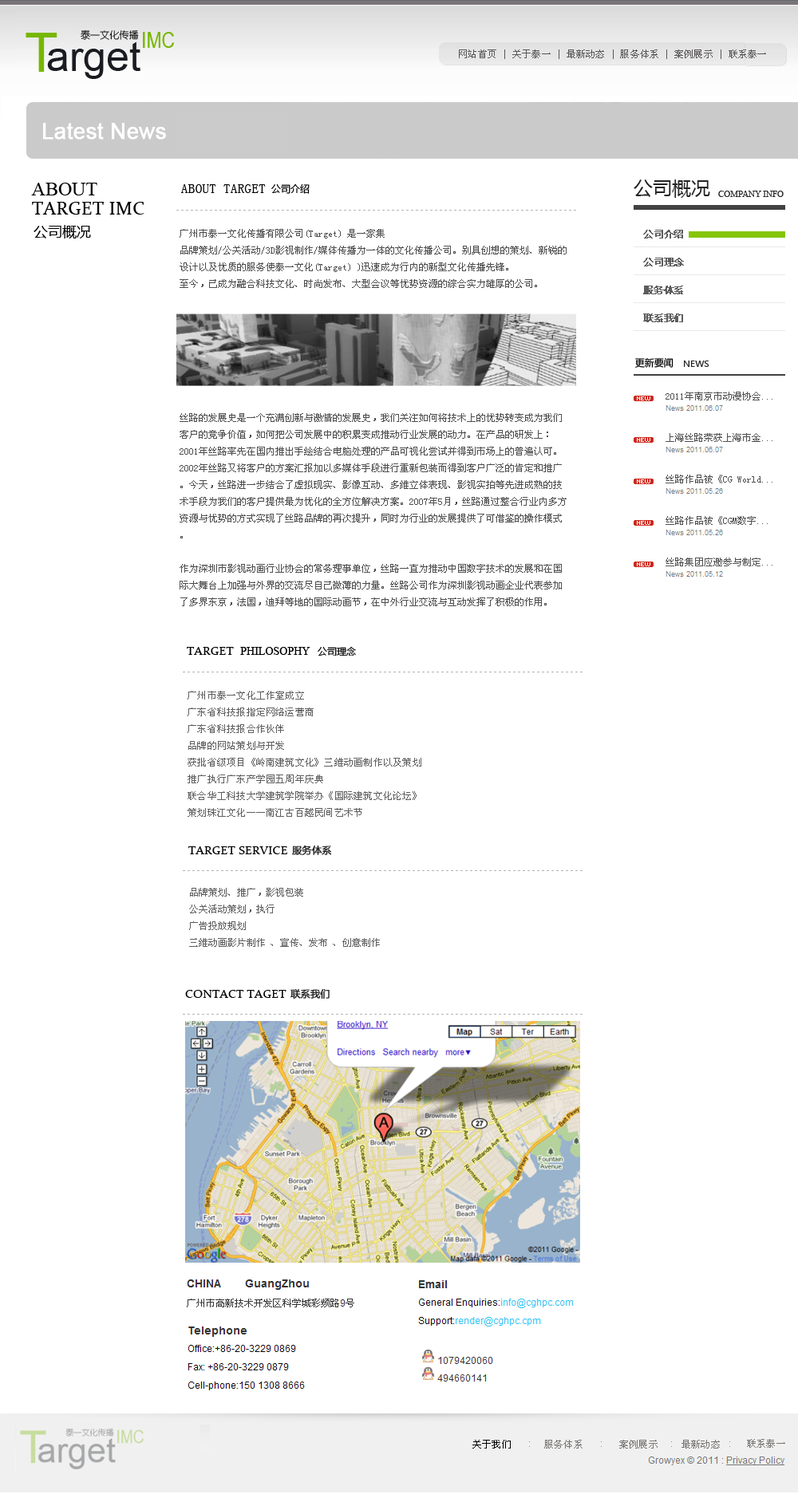
<style>
.page{position:relative;width:798px;height:1494px;background:#ffffff}
.page>*{position:absolute;margin:0}
.t1{font:21.5px "ArialMT";color:#ffffff;font-weight:bold}
.t2{font:21.5px "YouYuan";color:#ffffff;font-weight:bold}
.t3{font:13.6px "SimSun";letter-spacing:0.02em;color:#000000}
.t4{font:18.4px "Constantia";letter-spacing:0.02em;color:#000000}
.t5{font:9.6px "SimSun";color:#4e4e4e}
.t6{font:9.6px/27.9px "MicrosoftYaHei";letter-spacing:-0.02em;color:#5d5d5d;font-weight:bold}
.t7{font:12px "Constantia";letter-spacing:0.02em;color:#000000}
.t8{font:9.6px "SimSun";letter-spacing:0.02em;color:#605f5f}
.t9{font:9.6px "MicrosoftYaHei";color:#282828;font-weight:bold}
.t10{font:9.6px "SimSun";color:#605f5f}
</style>
<div class="page">
<p class="t1" style="left:43px;top:121px;width:224px;height:22px">Latest News  <span class="t2">公司动态</span></p>
<p class="t3" style="left:181px;top:184px;width:85px;height:9px">ABOUT TARGET</p>
<p class="t4" style="left:32px;top:202px;width:112px;height:13px">TARGET IMC</p>
<p class="t5" style="left:180px;top:229px;width:387px;height:377px">广州市泰一文化传播有限公司(Target) 是一家集<br>品牌策划/公关活动/3D影视制作/媒体传播为一体的文化传播公司。别具创想的策划、新锐的设计以及优质的服务使泰一文化(Target) )迅速成为行内的新型文化传播先锋。 <br>至今，已成为融合科技文化、时尚发布、大型会议等优势资源的综合实力雄厚的公司。<br><br><br><br><br><br><br><br>丝路的发展史是一个充满创新与激情的发展史，我们关注如何将技术上的优势转变成为我们客户的竞争价值，如何把公司发展中的积累变成推动行业发展的动力。在产品的研发上： 2001年丝路率先在国内推出手绘结合电脑处理的产品可视化尝试并得到市场上的普遍认可。2002年丝路又将客户的方案汇报加以多媒体手段进行重新包装而得到客户广泛的肯定和推广。今天，丝路进一步结合了虚拟现实、影像互动、多维立体表现、影视实拍等先进成熟的技术手段为我们的客户提供最为优化的全方位解决方案。2007年5月，丝路通过整合行业内多方资源与优势的方式实现了丝路品牌的再次提升，同时为行业的发展提供了可借鉴的操作模式。 <br><br>作为深圳市影视动画行业协会的常务理事单位，丝路一直为推动中国数字技术的发展和在国际大舞台上加强与外界的交流尽自己微薄的力量。丝路公司作为深圳影视动画企业代表参加了多界东京，法国，迪拜等地的国际动画节，在中外行业交流与互动发挥了积极的作用。</p>
<p class="t6" style="left:643px;top:230px;width:41px;height:92px">公司介绍<br>公司理念<br>服务体系<br>联系我们</p>
<p class="t7" style="left:187px;top:647px;width:47px;height:8px">TARGET</p>
<p class="t8" style="left:188px;top:691px;width:233px;height:126px">广州市泰一文化工作室成立<br>广东省科技报指定网络运营商<br>广东省科技报合作伙伴<br>品牌的网站策划与开发<br>获批省级项目《岭南建筑文化》三维动画制作以及策划<br>推广执行广东产学园五周年庆典<br>联合华工科技大学建筑学院举办《国际建筑文化论坛》<br>策划珠江文化——南江古百越民间艺术节</p>
<p class="t9" style="left:292px;top:845px;width:40px;height:10px">服务体系</p>
<p class="t7" style="left:188px;top:847px;width:99px;height:8px">TARGET SERVICE</p>
<p class="t10" style="left:189px;top:888px;width:191px;height:59px">品牌策划、推广，影视包装<br>公关活动策划，执行<br>广告投放规划<br>三维动画影片制作 、宣传、发布 、创意制作</p>
<p class="t9" style="left:290px;top:989px;width:40px;height:10px">联系我们</p>
<p class="t7" style="left:185px;top:990px;width:101px;height:8px">CONTACT TAGET</p>
</div>
